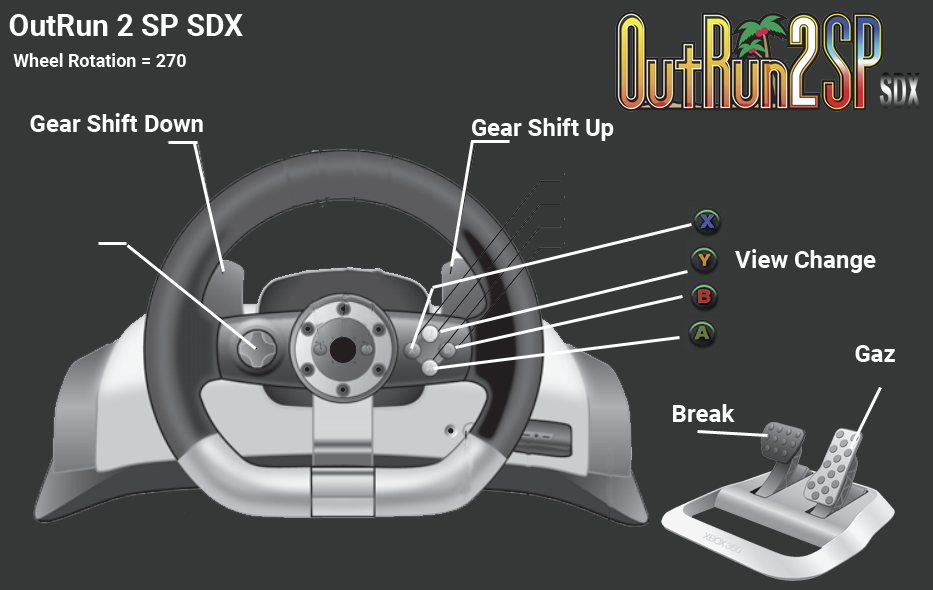
<style>
.page{position:relative;width:933px;height:590px;background:#363838}
.page>*{position:absolute;margin:0}
.t1{font:30px "Roboto-Bold";color:#ffffff}
.t2{font:18px "Roboto-Bold";color:#ffffff}
.t3{font:24px "Roboto-Bold";color:#ffffff}
</style>
<div class="page">
<p class="t1" style="left:9px;top:14px;width:234px;height:22px">OutRun 2 SP SDX</p>
<p class="t2" style="left:13px;top:53px;width:173px;height:14px">Wheel Rotation = 270</p>
<p class="t3" style="left:30px;top:113px;width:173px;height:19px">Gear Shift Down</p>
<p class="t3" style="left:472px;top:117px;width:142px;height:24px">Gear Shift Up</p>
<p class="t3" style="left:735px;top:249px;width:141px;height:24px">View Change</p>
<p class="t3" style="left:855px;top:345px;width:40px;height:17px">Gaz</p>
<p class="t3" style="left:673px;top:404px;width:62px;height:18px">Break</p>
</div>
